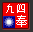
<style>
.page{position:relative;width:33px;height:32px;background:#f20000}
.page>*{position:absolute;margin:0}
.t1{font:10.4px "SimSun";color:#ffffff}
.t2{font:11.7px "SimSun";color:#ffffff}
</style>
<div class="page">
<p class="t1" style="left:6px;top:4px;width:19px;height:9px">九四</p>
<p class="t2" style="left:16px;top:15px;width:11px;height:12px">奉</p>
</div>
